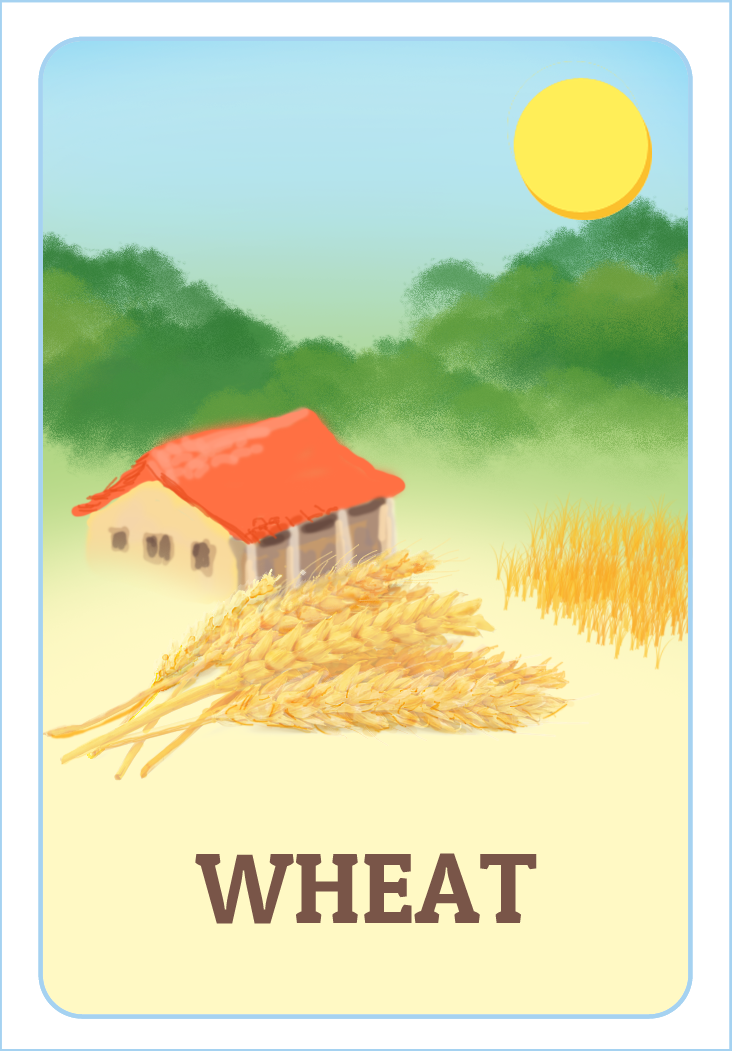
<style>
.page{position:relative;width:732px;height:1051px;background:#fff9c4}
.page>*{position:absolute;margin:0}
.t1{font:100px "PatuaOne-Regular";color:#795548}
</style>
<div class="page">
<p class="t1" style="left:195px;top:853px;width:342px;height:71px">WHEAT</p>
</div>
